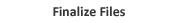
<style>
.page{position:relative;width:180px;height:23px;background:#ffffff}
.page>*{position:absolute;margin:0}
.t1{font:14px "Calibri-Bold";color:#363535}
</style>
<div class="page">
<p class="t1" style="left:53px;top:6px;width:72px;height:11px">Finalize Files</p>
</div>
